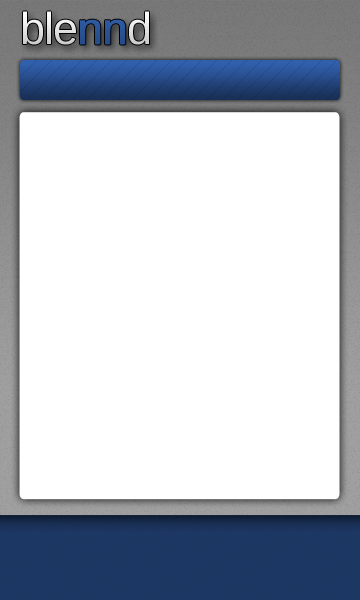
<style>
.page{position:relative;width:360px;height:600px;background:#ffffff}
.page>*{position:absolute;margin:0}
.t1{font:45px "Arimo";letter-spacing:-0.025em}
.t2{font:45px "Arimo";letter-spacing:-0.025em;font-weight:bold}
</style>
<div class="page">
<p class="t1" style="left:23px;top:11px;width:126px;height:34px">ble<span class="t2">nn</span>d</p>
</div>
